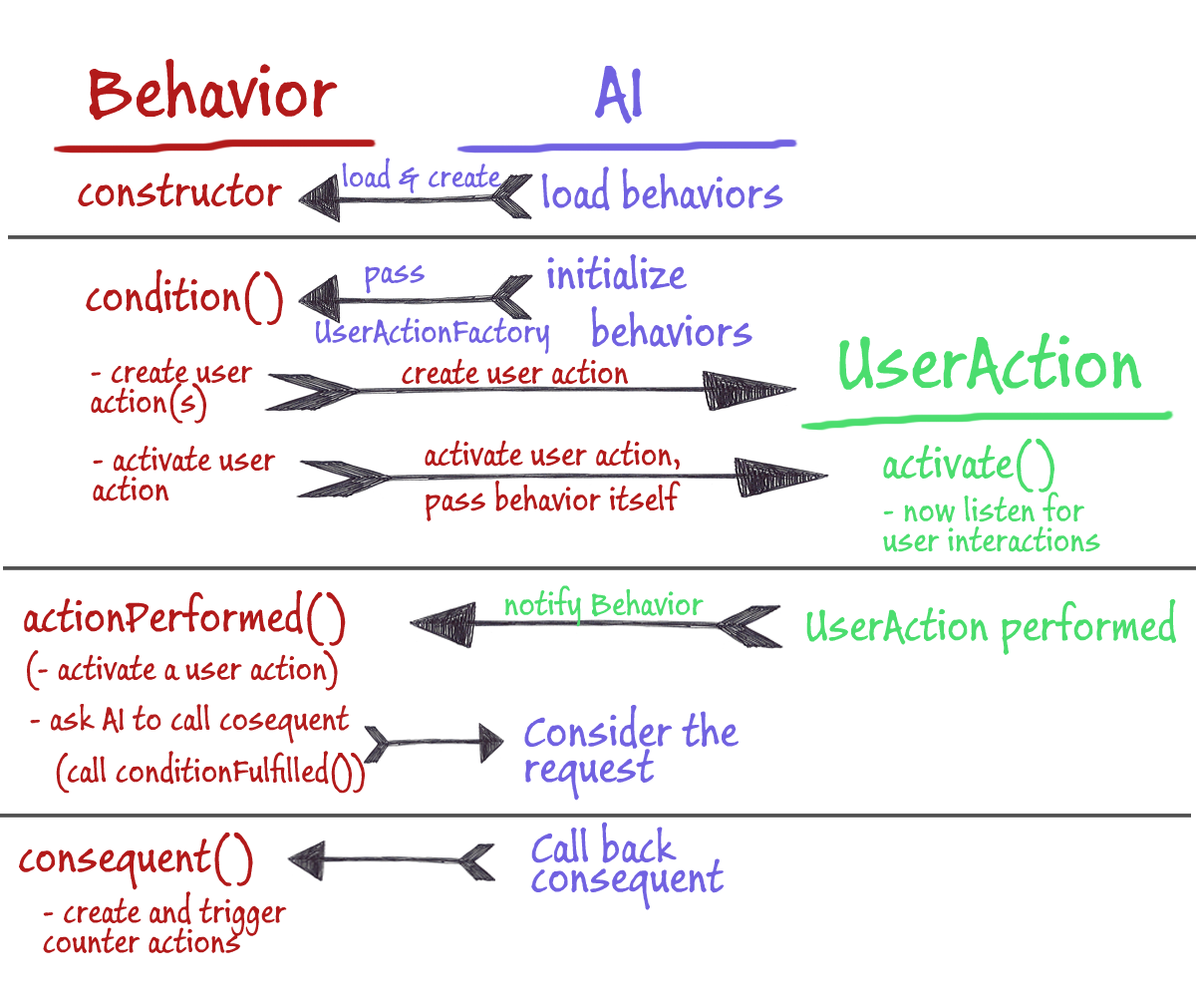
<style>
.page{position:relative;width:1196px;height:997px;background:#ffffff}
.page>*{position:absolute;margin:0}
.t1{font:79.7px "BuxtonSketch";color:#b21a1a}
.t2{font:79.7px "BuxtonSketch";color:#7162e1}
.t3{font:33.5px "BuxtonSketch";color:#7162e1}
.t4{font:47.8px "BuxtonSketch";color:#b21a1a}
.t5{font:47.8px "BuxtonSketch";color:#7162e1}
.t6{font:35.9px/59.8px "BuxtonSketch";color:#7162e1}
.t7{font:79.7px "BuxtonSketch";color:#4bdd6e}
.t8{font:35.9px/29.9px "BuxtonSketch";color:#b21a1a}
.t9{font:35.9px "BuxtonSketch";color:#b21a1a}
.t10{font:47.8px "BuxtonSketch";color:#4bdd6e}
.t11{font:35.9px/29.9px "BuxtonSketch";color:#4bdd6e}
.t12{font:35.9px "BuxtonSketch";color:#4bdd6e}
.t13{font:0px "BuxtonSketch";color:#4bdd6e}
.t14{font:35.9px "BuxtonSketch";color:#b31e1e}
.t15{font:47.8px/35.9px "BuxtonSketch";color:#7162e1}
.t16{font:47.8px/29.9px "BuxtonSketch";color:#7162e1}
</style>
<div class="page">
<p class="t1" style="left:89px;top:59px;width:249px;height:62px">Behavior</p>
<p class="t2" style="left:595px;top:66px;width:47px;height:58px">AI</p>
<p class="t3" style="left:342px;top:158px;width:159px;height:35px">load &amp; create</p>
<p class="t4" style="left:78px;top:172px;width:204px;height:35px">constructor</p>
<p class="t5" style="left:541px;top:166px;width:243px;height:44px">load behaviors</p>
<p class="t5" style="left:547px;top:254px;width:206px;height:93px">initialize<br>    behaviors</p>
<p class="t4" style="left:86px;top:269px;width:197px;height:56px">condition( )</p>
<p class="t6" style="left:316px;top:265px;width:233px;height:89px">pass<br>UserActionFactory</p>
<p class="t7" style="left:839px;top:332px;width:303px;height:63px">UserAction</p>
<p class="t8" style="left:91px;top:357px;width:162px;height:67px">- create user<br>action(s)</p>
<p class="t9" style="left:402px;top:358px;width:226px;height:27px">create user action</p>
<p class="t8" style="left:93px;top:446px;width:183px;height:55px">- activate user<br>action</p>
<p class="t9" style="left:425px;top:440px;width:255px;height:30px">activate user action,</p>
<p class="t10" style="left:883px;top:439px;width:172px;height:53px">activate( )</p>
<p class="t9" style="left:426px;top:480px;width:255px;height:41px">pass behavior itself</p>
<p class="t11" style="left:883px;top:491px;width:218px;height:61px">- now listen for<br>user interactions</p>
<p class="t4" style="left:24px;top:590px;width:322px;height:56px">actionPerformed( )</p>
<p class="t12" style="left:505px;top:585px;width:199px;height:42px"><span class="t13">not</span>notify Behavior</p>
<p class="t10" style="left:806px;top:599px;width:370px;height:56px">UserAction performed</p>
<p class="t9" style="left:27px;top:650px;width:311px;height:41px">(- activate a user action)</p>
<p class="t14" style="left:30px;top:704px;width:320px;height:40px">- ask AI to call cosequent</p>
<p class="t15" style="left:524px;top:705px;width:215px;height:95px">Consider the<br>request</p>
<p class="t9" style="left:56px;top:751px;width:309px;height:42px">(call conditionFulfilled())</p>
<p class="t16" style="left:531px;top:821px;width:194px;height:89px">Call back<br>consequent</p>
<p class="t4" style="left:19px;top:832px;width:234px;height:58px">consequent( )</p>
<p class="t8" style="left:43px;top:891px;width:244px;height:62px">- create and trigger<br>counter actions</p>
</div>
